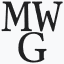
<style>
.page{position:relative;width:64px;height:64px;background:#f8f9fa}
.page>*{position:absolute;margin:0}
.t1{font:48px "LinLibertineMO";color:#202122}
</style>
<div class="page">
<p class="t1" style="left:1px;top:1px;width:62px;height:31px">MW</p>
<p class="t1" style="left:18px;top:32px;width:29px;height:31px">G</p>
</div>
